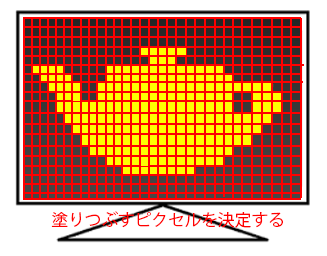
<style>
.page{position:relative;width:327px;height:256px;background:#ffffff}
.page>*{position:absolute;margin:0}
.t1{font:16.7px "KozGoPr6N-Regular";color:#ff0000}
</style>
<div class="page">
<p class="t1" style="left:51px;top:211px;width:232px;height:17px">塗りつぶすピクセルを決定する</p>
</div>
